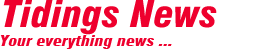
<style>
.page{position:relative;width:261px;height:49px;background:#ffffff}
.page>*{position:absolute;margin:0}
.t1{font:36px "Swiss721BT-BlackCondensedItalic";color:#ee002d;scale:1.08 1}
.t2{font:14px "Swiss721BT-BlackCondensedItalic";color:#ee002d;scale:1.23 1}
</style>
<div class="page">
<p class="t1" style="left:3px;top:0px;width:214px;height:35px">Tidings News</p>
<p class="t2" style="left:0px;top:35px;width:172px;height:14px">Your everything news ...</p>
</div>
